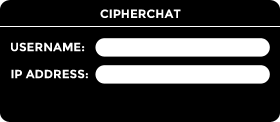
<style>
.page{position:relative;width:280px;height:122px;background:#000000}
.page>*{position:absolute;margin:0}
.t1{font:12px "Montserrat-Bold";color:#ffffff}
</style>
<div class="page">
<p class="t1" style="left:100px;top:9px;width:81px;height:9px">CIPHERCHAT</p>
<p class="t1" style="left:11px;top:42px;width:74px;height:10px">USERNAME:</p>
<p class="t1" style="left:11px;top:69px;width:77px;height:10px">IP ADDRESS:</p>
</div>
